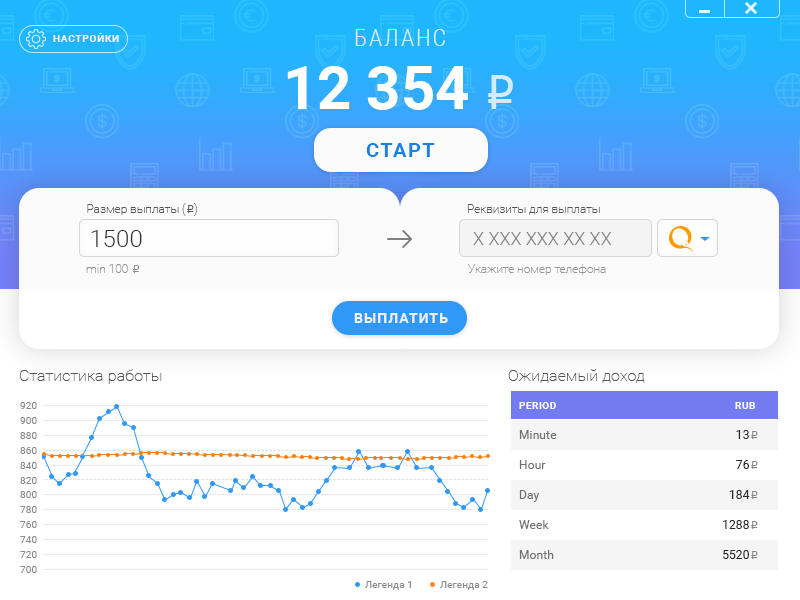
<style>
.page{position:relative;width:800px;height:600px;background:#ffffff}
.page>*{position:absolute;margin:0}
.t1{font:24px "RobotoCondensed-Light";letter-spacing:0.075em;color:#d3ebff;text-transform:uppercase}
.t2{font:10px "Roboto-Bold";letter-spacing:0.075em;color:#f0f8ff;text-transform:uppercase}
.t3{font:60px "Roboto-Bold";color:#ffffff;text-transform:uppercase}
.t4{font:48px "ALSRubl";color:#d3ebff}
.t5{font:20px "Roboto-Bold";letter-spacing:0.075em;color:#1782e3;text-transform:uppercase}
.t6{font:12px "Roboto-Thin";color:#545454}
.t7{font:12px "ALSRubl";color:#545454}
.t8{font:24px "Roboto-Light";color:#333333;text-transform:uppercase}
.t9{font:18px "Roboto-Light";color:#868686;text-transform:uppercase}
.t10{font:12px "Roboto-Thin";color:#939393}
.t11{font:12px "ALSRubl";color:#939393}
.t12{font:14px "Roboto-Bold";letter-spacing:0.075em;color:#f0f0f0;text-transform:uppercase}
.t13{font:16px "Roboto-Thin";letter-spacing:0.01em;color:#545454}
.t14{font:10px "Roboto-Regular";letter-spacing:0.01em;color:#8c8c8c}
.t15{font:12px/30px "Roboto-Regular";letter-spacing:0.01em;color:#707070}
.t16{font:10px/30px "Roboto-Bold";letter-spacing:0.05em;color:#ffffff;text-transform:uppercase}
.t17{font:12px/30px "Roboto-Regular";letter-spacing:0.01em;color:#272727}
.t18{font:12px/30px "ALSRubl";letter-spacing:0.01em;color:#868686}
</style>
<div class="page">
<p class="t1" style="left:355px;top:29px;width:90px;height:17px">Баланс</p>
<p class="t2" style="left:53px;top:33px;width:66px;height:9px">Настройки</p>
<p class="t3" style="left:287px;top:66px;width:226px;height:44px">12 354 <span class="t4">i</span></p>
<p class="t5" style="left:366px;top:143px;width:69px;height:14px">СТАРТ</p>
<p class="t6" style="left:87px;top:203px;width:110px;height:13px">Размер выплаты (<span class="t7">i</span>)</p>
<p class="t6" style="left:468px;top:204px;width:132px;height:11px">Реквизиты для выплаты</p>
<p class="t8" style="left:91px;top:230px;width:51px;height:17px">1500</p>
<p class="t9" style="left:473px;top:232px;width:139px;height:13px">X xxx xxx xx xx</p>
<p class="t10" style="left:86px;top:264px;width:54px;height:9px">min 100 <span class="t11">i</span></p>
<p class="t10" style="left:468px;top:264px;width:138px;height:11px">Укажите номер телефона</p>
<p class="t12" style="left:354px;top:313px;width:94px;height:10px">Выплатить</p>
<p class="t13" style="left:20px;top:369px;width:142px;height:15px">Статистика работы</p>
<p class="t13" style="left:508px;top:369px;width:137px;height:14px">Ожидаемый доход</p>
<p class="t14" style="left:20px;top:402px;width:17px;height:7px">920</p>
<p class="t15" style="left:519px;top:402px;width:236px;height:157px"><span class="t16">Period     RUB<br></span>Minute     <br>Hour      <br>Day      <br>Week      <br>Month</p>
<p class="t14" style="left:20px;top:417px;width:17px;height:7px">900</p>
<p class="t14" style="left:20px;top:432px;width:17px;height:7px">880</p>
<p class="t17" style="left:723px;top:430px;width:35px;height:129px;text-align:right"><span class="t16"> <br></span>13<span class="t18">i<br></span>76<span class="t18">i<br></span>184<span class="t18">i<br></span>1288<span class="t18">i<br></span>5520<span class="t18">i</span></p>
<p class="t14" style="left:20px;top:447px;width:17px;height:7px">860</p>
<p class="t14" style="left:20px;top:462px;width:17px;height:7px">840</p>
<p class="t14" style="left:20px;top:477px;width:17px;height:7px">820</p>
<p class="t14" style="left:20px;top:491px;width:17px;height:7px">800</p>
<p class="t14" style="left:20px;top:506px;width:17px;height:7px">780</p>
<p class="t14" style="left:20px;top:521px;width:17px;height:7px">760</p>
<p class="t14" style="left:20px;top:536px;width:17px;height:7px">740</p>
<p class="t14" style="left:20px;top:551px;width:17px;height:7px">720</p>
<p class="t14" style="left:20px;top:566px;width:17px;height:7px">700</p>
<p class="t14" style="left:365px;top:581px;width:46px;height:9px">Легенда 1</p>
<p class="t14" style="left:440px;top:581px;width:48px;height:9px">Легенда 2</p>
</div>
